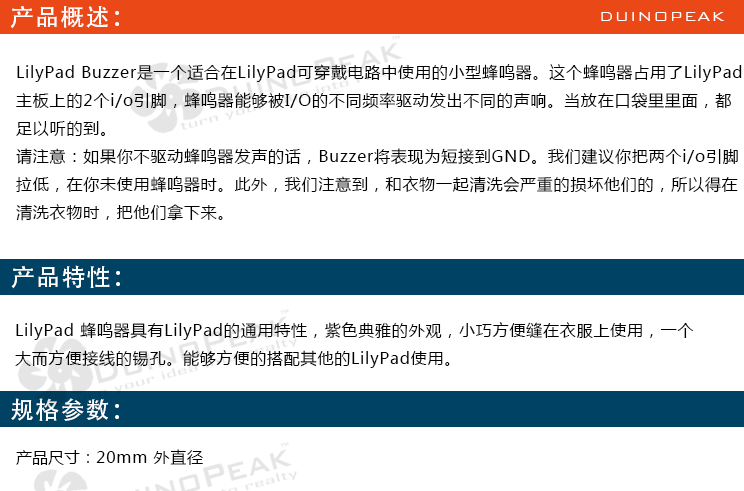
<style>
.page{position:relative;width:744px;height:491px;background:#ffffff}
.page>*{position:absolute;margin:0}
.t1{font:24px "AdobeHeitiStd-Regular";letter-spacing:0.05em;color:#ffffff}
.t2{font:18px "BankGothicBT-Light";letter-spacing:0.05em;color:#ffffff}
.t3{font:16px "MicrosoftYaHei";letter-spacing:0.05em;color:#000000}
.t4{font:16px "MicrosoftYaHei";color:#000000}
</style>
<div class="page">
<p class="t1" style="left:10px;top:6px;width:109px;height:23px">产品概述：</p>
<p class="t2" style="left:601px;top:12px;width:124px;height:9px">DUINOPEAK</p>
<p class="t3" style="left:16px;top:64px;width:726px;height:157px">LilyPad Buzzer是一个适合在LilyPad可穿戴电路中使用的小型蜂鸣器。这个蜂鸣器占用了LilyPad<br>主板上的2个i/o引脚，蜂鸣器能够被I/O的不同频率驱动发出不同的声响。当放在口袋里里面，都<br>足以听的到。<br>请注意：如果你不驱动蜂鸣器发声的话，Buzzer将表现为短接到GND。我们建议你把两个i/o引脚<br>拉低，在你未使用蜂鸣器时。此外，我们注意到，和衣物一起清洗会严重的损坏他们的，所以得在<br>清洗衣物时，把他们拿下来。</p>
<p class="t1" style="left:11px;top:265px;width:109px;height:24px">产品特性：</p>
<p class="t3" style="left:15px;top:322px;width:679px;height:46px">LilyPad 蜂鸣器具有LilyPad的通用特性，紫色典雅的外观，小巧方便缝在衣服上使用，一个<br>大而方便接线的锡孔。能够方便的搭配其他的LilyPad使用。</p>
<p class="t1" style="left:11px;top:398px;width:108px;height:23px">规格参数：</p>
<p class="t3" style="left:16px;top:449px;width:187px;height:16px"><span class="t4">产品尺寸：</span>20mm 外直径</p>
</div>
